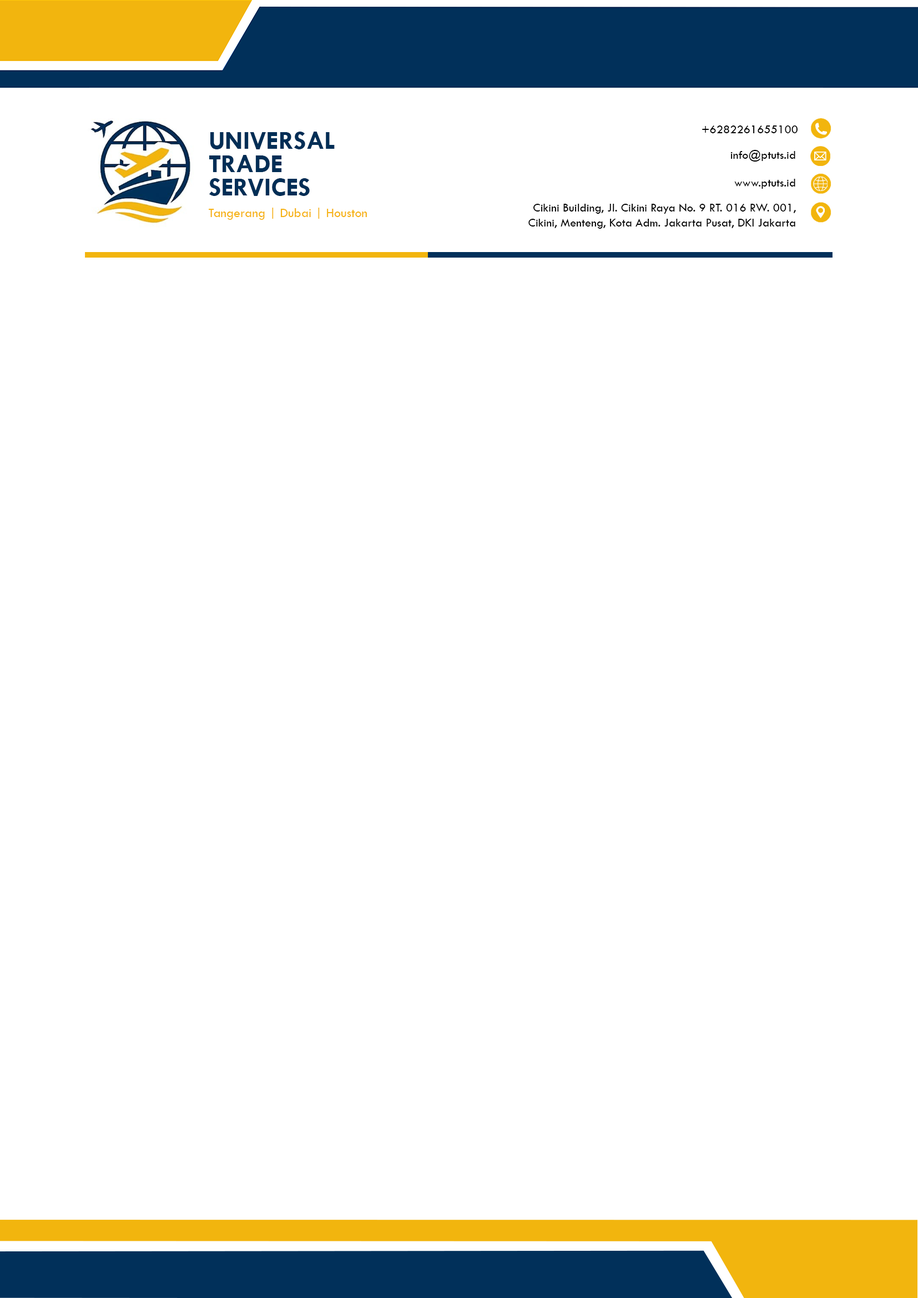
<style>
.page{position:relative;width:918px;height:1298px;background:#ffffff}
.page>*{position:absolute;margin:0}
.t1{font:12.3px "TwCenMT-Regular";color:#000000}
.t2{font:26px/23.3px "TwCenMT-Bold";color:#002e56}
.t3{font:13.4px "TwCenMT-Regular";color:#f6b314}
</style>
<div class="page">
<p class="t1" style="left:702px;top:125px;width:96px;height:8px">+6282261655100</p>
<p class="t2" style="left:209px;top:132px;width:126px;height:64px;text-align:right">UNIVERSAL<br>TRADE<br>SERVICES</p>
<p class="t1" style="left:731px;top:150px;width:65px;height:12px">info@ptuts.id</p>
<p class="t1" style="left:735px;top:179px;width:61px;height:10px">www.ptuts.id</p>
<p class="t3" style="left:209px;top:208px;width:158px;height:12px">Tangerang | Dubai | Houston</p>
<p class="t1" style="left:529px;top:203px;width:267px;height:26px;text-align:right">Cikini Building, Jl. Cikini Raya No. 9 RT. 016 RW. 001, Cikini, Menteng, Kota Adm. Jakarta Pusat, DKI Jakarta</p>
</div>
